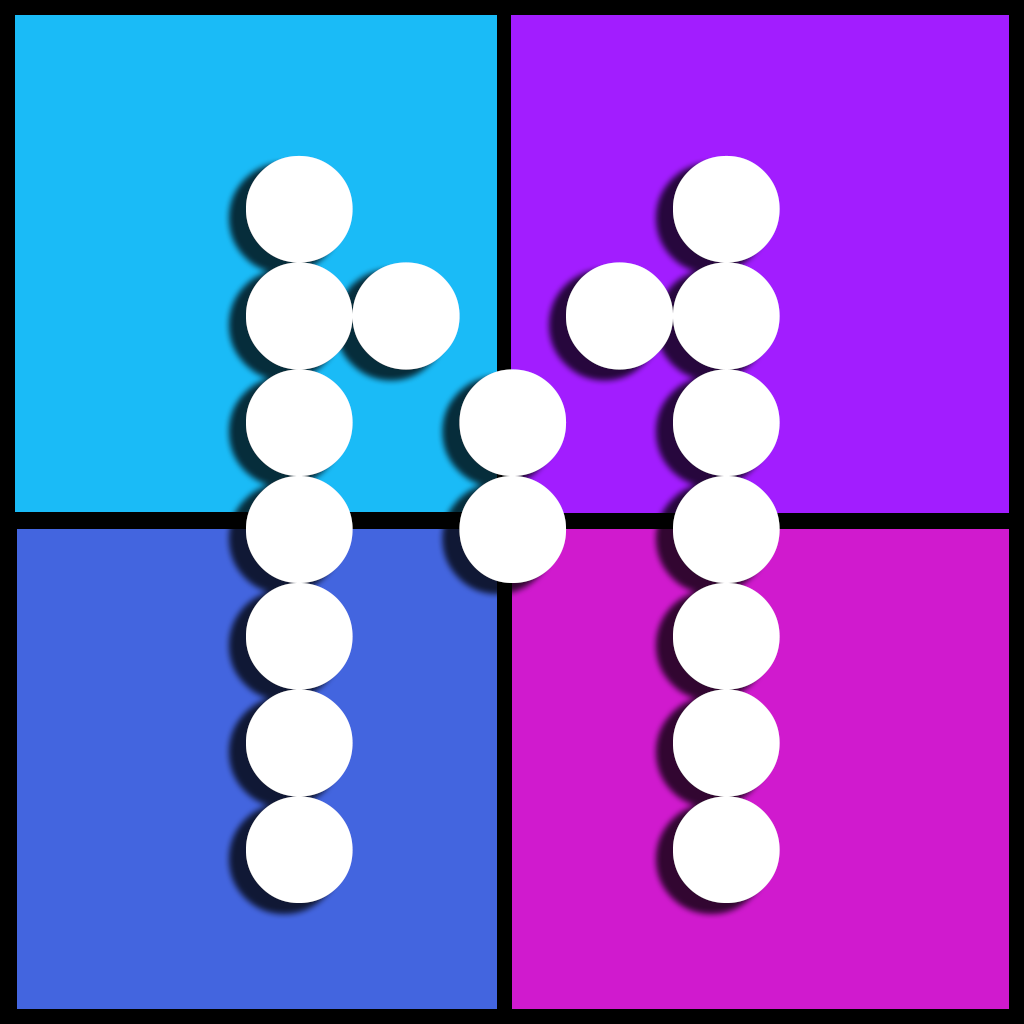
<style>
.page{position:relative;width:1024px;height:1024px}
.page>*{position:absolute;margin:0}
.t1{font:961px "NothingFont5x7";color:#ffffff}
</style>
<div class="page">
<p class="t1" style="left:246px;top:155px;width:534px;height:748px">M</p>
</div>
